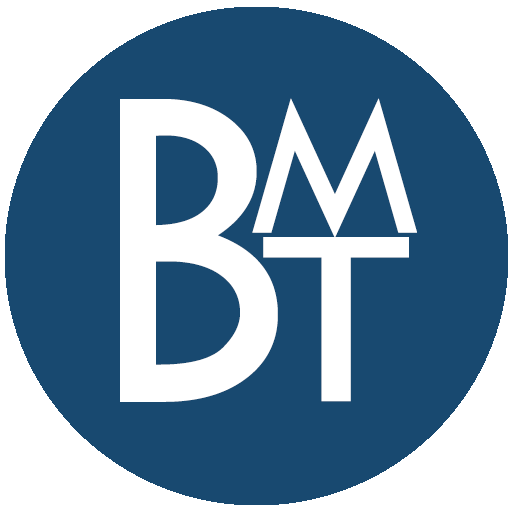
<style>
.page{position:relative;width:512px;height:512px;background:#184970}
.page>*{position:absolute;margin:0}
.t1{font:486.8px "TwCenMT-Regular";color:#ffffff;scale:0.88 1}
.t2{font:206.6px "TwCenMT-Regular";color:#ffffff;scale:1.09 1}
.t3{font:219px "Small Fonts";color:#ffffff;scale:1.7 1}
</style>
<div class="page">
<p class="t1" style="left:120px;top:99px;width:158px;height:303px">B</p>
<p class="t2" style="left:252px;top:98px;width:165px;height:140px">M</p>
<p class="t3" style="left:263px;top:237px;width:146px;height:165px">T</p>
</div>
